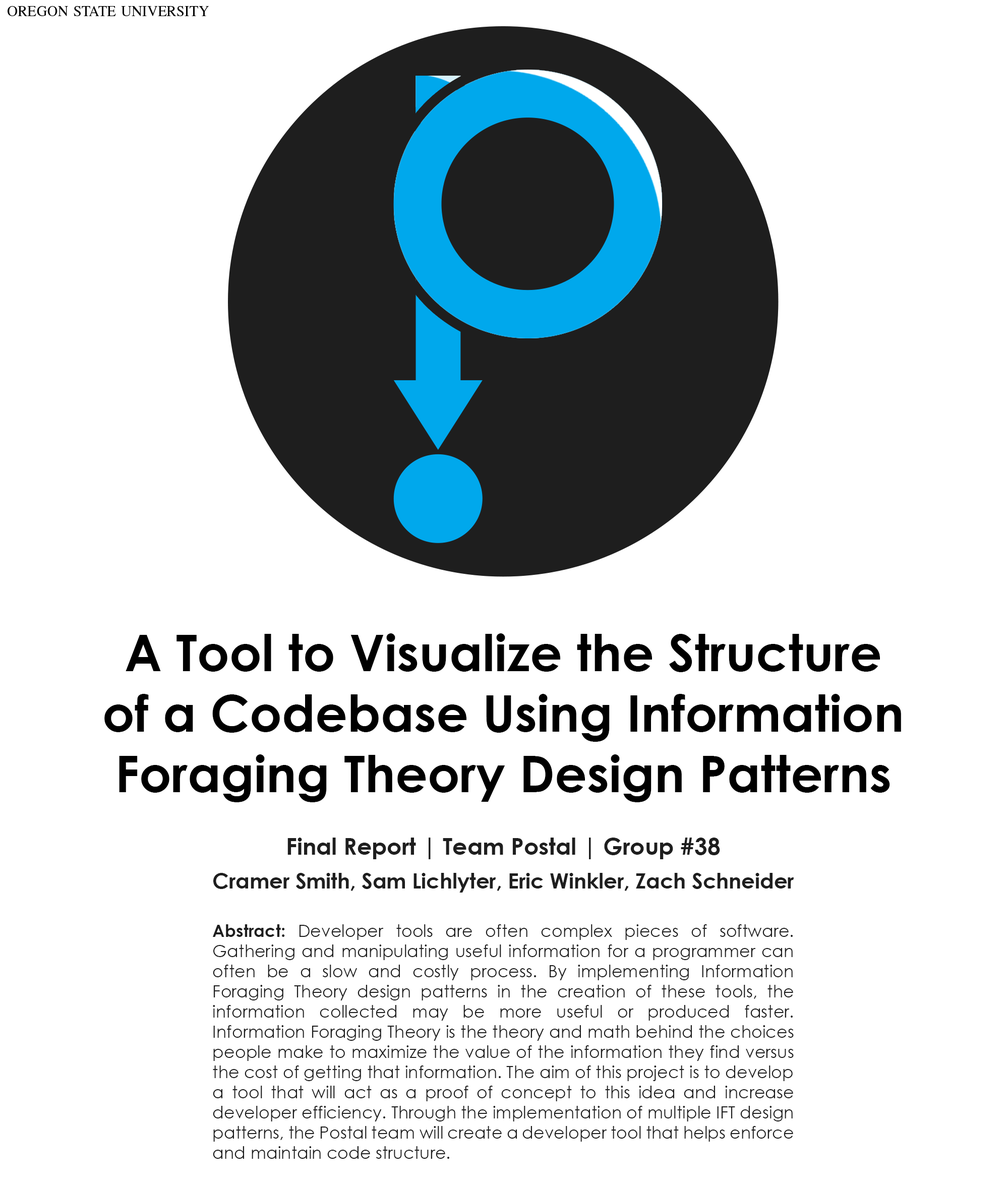
<style>
.page{position:relative;width:1006px;height:1185px;background:#ffffff}
.page>*{position:absolute;margin:0}
.t1{font:50.4px "CenturyGothic-Bold";color:#000000}
.t2{font:23.1px "CenturyGothic-Bold";color:#1e1e1e}
.t3{font:21px "CenturyGothic-Bold";color:#1e1e1e}
.t4{font:16.8px "CenturyGothic";color:#1e1e1e}
.t5{font:16.8px "CenturyGothic-Bold";color:#1e1e1e}
</style>
<div class="page">
<p class="t1" style="left:104px;top:633px;width:797px;height:169px;text-align:center">A Tool to Visualize the Structure of a Codebase Using Information Foraging Theory Design Patterns</p>
<p class="t2" style="left:287px;top:838px;width:433px;height:21px">Final Report | Team Postal | Group #38</p>
<p class="t3" style="left:213px;top:873px;width:581px;height:20px">Cramer Smith, Sam Lichlyter, Eric Winkler, Zach Schneider</p>
<p class="t4" style="left:213px;top:924px;width:581px;height:235px;text-align:justify"><span class="t5">Abstract: </span>Developer tools are often complex pieces of software. Gathering and manipulating useful information for a programmer can often be a slow and costly process. By implementing Information Foraging Theory design patterns in the creation of these tools, the information collected may be more useful or produced faster. Information Foraging Theory is the theory and math behind the choices people make to maximize the value of the information they find versus the cost of getting that information. The aim of this project is to develop a tool that will act as a proof of concept to this idea and increase developer efficiency. Through the implementation of multiple IFT design patterns, the Postal team will create a developer tool that helps enforce and maintain code structure.</p>
</div>
